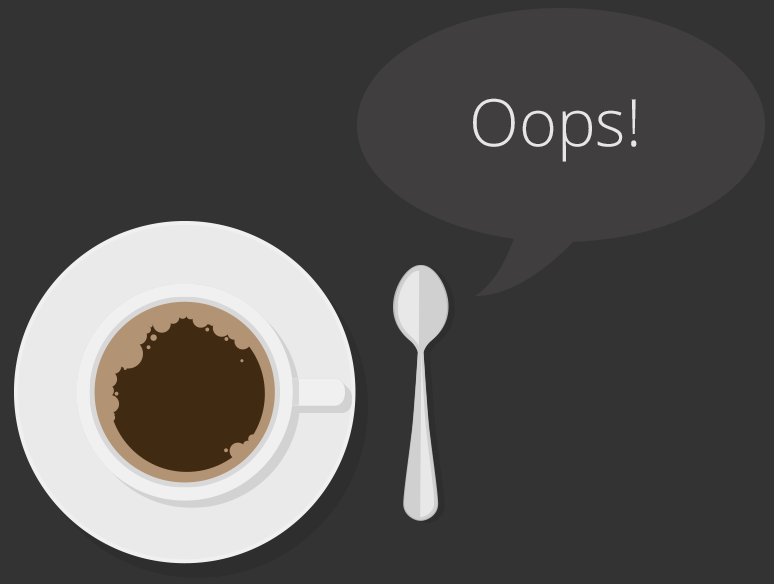
<style>
.page{position:relative;width:774px;height:584px;background:#333333}
.page>*{position:absolute;margin:0}
.t1{font:65px "OpenSans-Light";color:#e6e6e6}
</style>
<div class="page">
<p class="t1" style="left:473px;top:98px;width:164px;height:64px">Oops!</p>
</div>
